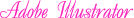
<style>
.page{position:relative;width:134px;height:18px;background:#ffffff}
.page>*{position:absolute;margin:0}
.t1{font:24px "UkrainianDecor";color:#fc24bc}
</style>
<div class="page">
<p class="t1" style="left:0px;top:0px;width:134px;height:19px">Adobe Illustrator</p>
</div>
